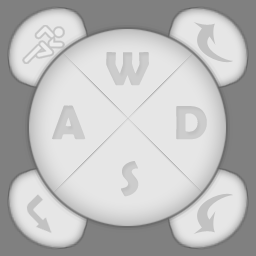
<style>
.page{position:relative;width:256px;height:256px;background:#e6e6e6}
.page>*{position:absolute;margin:0}
.t1{font:48px "BerlinSansFBDemi-Bold";letter-spacing:0.025em;color:#cccccc;text-transform:uppercase}
</style>
<div class="page">
<p class="t1" style="left:106px;top:52px;width:43px;height:34px">W</p>
<p class="t1" style="left:52px;top:105px;width:34px;height:35px">a</p>
<p class="t1" style="left:176px;top:106px;width:31px;height:34px">D</p>
<p class="t1" style="left:121px;top:161px;width:18px;height:36px">S</p>
</div>
